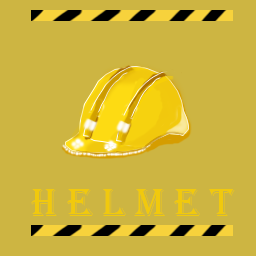
<style>
.page{position:relative;width:256px;height:256px;background:#cdb542}
.page>*{position:absolute;margin:0}
.t1{font:40.6px "Algerian";color:#f1c90d}
</style>
<div class="page">
<p class="t1" style="left:31px;top:189px;width:204px;height:27px">H e l m e t</p>
</div>
